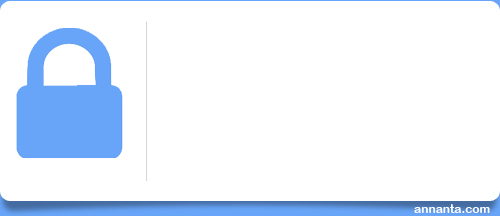
<style>
.page{position:relative;width:500px;height:216px;background:#ffffff}
.page>*{position:absolute;margin:0}
.t1{font:12px "ArialRoundedMTBold";color:#ffffff}
</style>
<div class="page">
<p class="t1" style="left:414px;top:204px;width:76px;height:9px">annanta.com</p>
</div>
